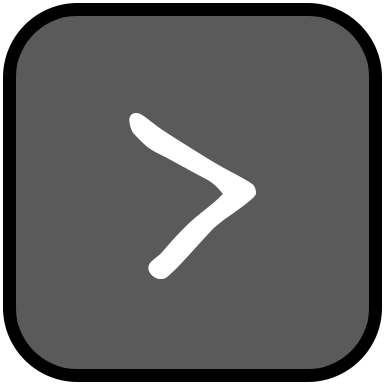
<style>
.page{position:relative;width:384px;height:384px;background:#5a5a5a}
.page>*{position:absolute;margin:0}
.t1{font:289px "SegoeScript";color:#ffffff}
</style>
<div class="page">
<p class="t1" style="left:129px;top:113px;width:127px;height:166px">&gt;</p>
</div>
